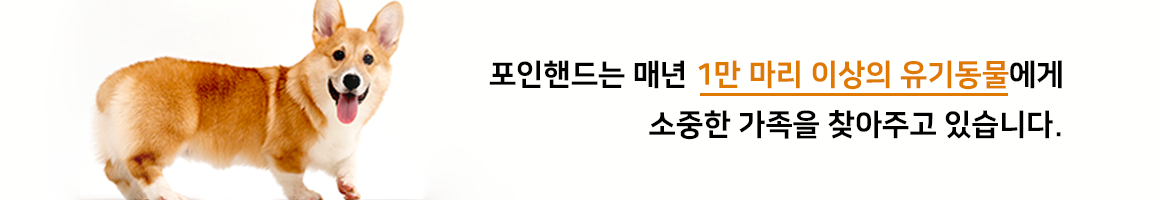
<style>
.page{position:relative;width:1160px;height:200px;background:#fffffd}
.page>*{position:absolute;margin:0}
.t1{font:30px/50px "NanumSquareEB";color:#000000}
.t2{font:30px/50px "NanumSquareEB";color:#df7900}
</style>
<div class="page">
<p class="t1" style="left:489px;top:60px;width:573px;height:80px;text-align:right">포인핸드는 매년 <span class="t2">1만 마리 이상의 유기동물</span>에게<br>소중한 가족을 찾아주고 있습니다.</p>
</div>
